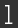
<style>
.page{position:relative;width:18px;height:28px;background:#333333}
.page>*{position:absolute;margin:0}
.t1{font:26.5px "NexaLight";color:#ffffff;scale:0.92 1}
</style>
<div class="page">
<p class="t1" style="left:5px;top:5px;width:8px;height:19px">1</p>
</div>
